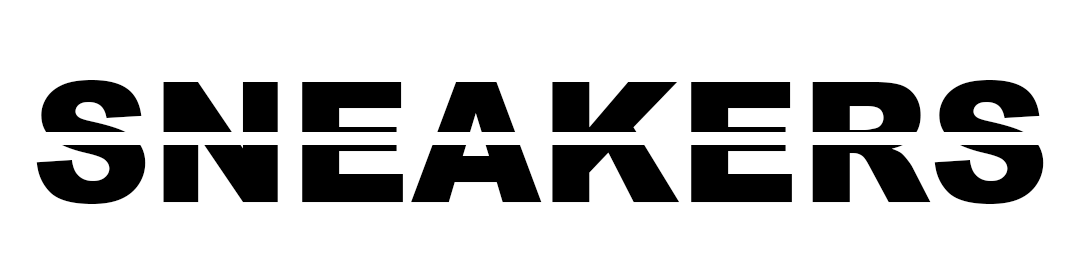
<style>
.page{position:relative;width:1080px;height:280px;background:#ffffff}
.page>*{position:absolute;margin:0}
.t1{font:166.8px "Arial-Black";color:#000000}
</style>
<div class="page">
<p class="t1" style="left:36px;top:80px;width:1008px;height:124px">SNEAKERS</p>
</div>
